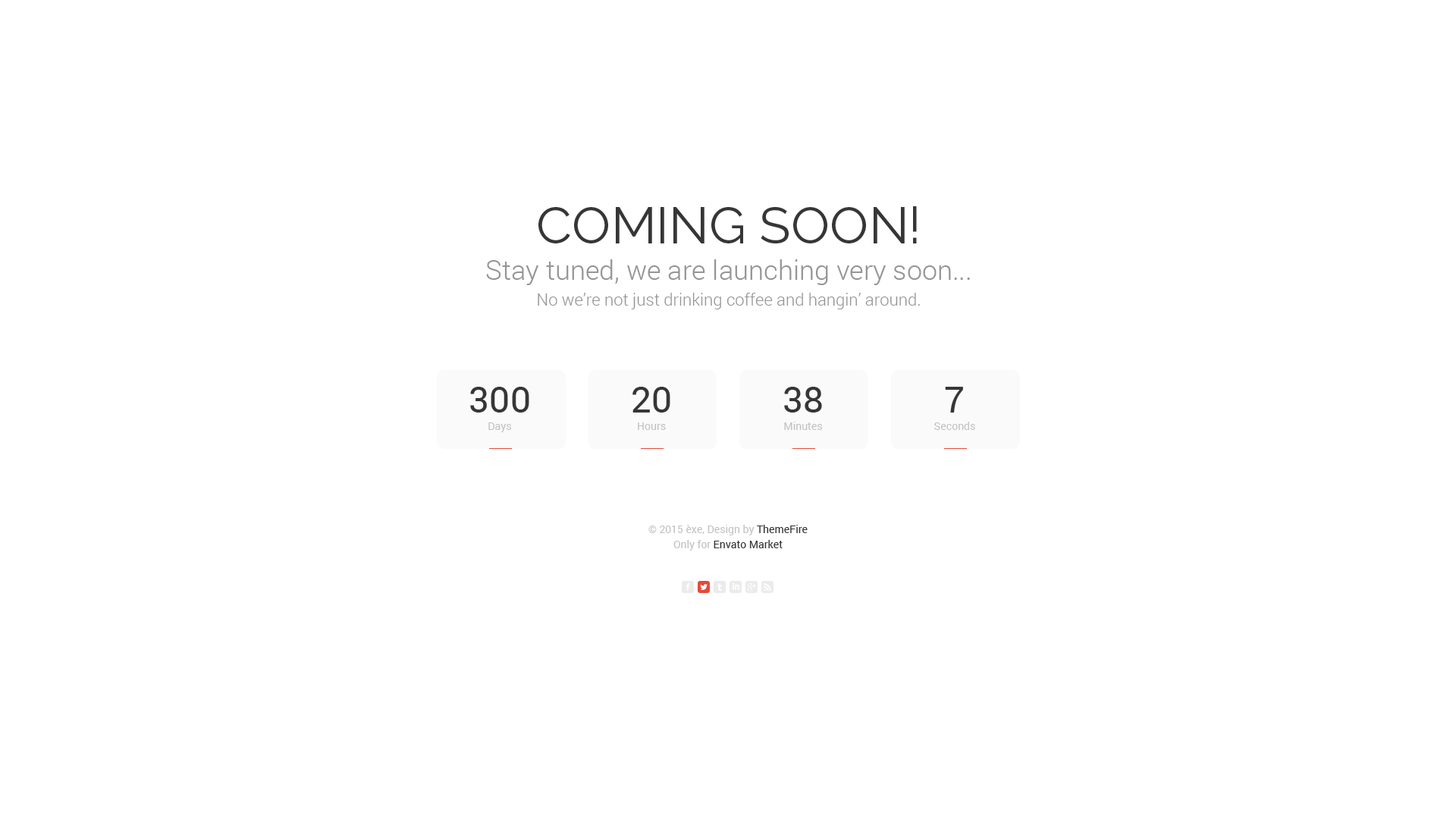
<style>
.page{position:relative;width:1456px;height:819px;background:#ffffff}
.page>*{position:absolute;margin:0}
.t1{font:51.6px "Raleway-Regular";color:#363636;text-transform:uppercase}
.t2{font:27.3px "Roboto-Light";color:#959595}
.t3{font:16.7px "Roboto-Light";color:#959595}
.t4{font:36.4px "Roboto-Regular";color:#363636;text-transform:uppercase}
.t5{font:10.6px "Roboto-Regular";color:#c2c2c2}
.t6{font:10.6px/15.2px "Roboto-Regular";color:#c2c2c2}
.t7{font:10.6px/15.2px "Roboto-Regular";color:#363636}
</style>
<div class="page">
<p class="t1" style="left:538px;top:206px;width:379px;height:37px">Coming Soon!</p>
<p class="t2" style="left:486px;top:259px;width:484px;height:26px">Stay tuned, we are launching very soon...</p>
<p class="t3" style="left:538px;top:293px;width:382px;height:16px">No we’re not just drinking coffee and hangin’ around.</p>
<p class="t4" style="left:470px;top:387px;width:59px;height:26px">300</p>
<p class="t4" style="left:632px;top:387px;width:38px;height:26px">20</p>
<p class="t4" style="left:784px;top:387px;width:38px;height:26px">38</p>
<p class="t4" style="left:945px;top:387px;width:18px;height:26px">7</p>
<p class="t5" style="left:488px;top:422px;width:23px;height:10px">Days</p>
<p class="t5" style="left:638px;top:422px;width:28px;height:8px">Hours</p>
<p class="t5" style="left:784px;top:422px;width:38px;height:8px">Minutes</p>
<p class="t5" style="left:934px;top:422px;width:41px;height:8px">Seconds</p>
<p class="t6" style="left:648px;top:525px;width:160px;height:26px;text-align:center">© 2015 èxe, Design by <span class="t7">ThemeFire<br></span>Only for <span class="t7">Envato Market</span></p>
</div>
